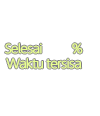
<style>
.page{position:relative;width:100px;height:116px;background:#ffffff}
.page>*{position:absolute;margin:0}
.t1{font:12px "UDShinGoPro-Light";letter-spacing:-0.08em;color:#e9ff90;font-weight:bold}
</style>
<div class="page">
<p class="t1" style="left:5px;top:43px;width:78px;height:11px">Selesai         %</p>
<p class="t1" style="left:6px;top:58px;width:76px;height:11px">Waktu tersisa</p>
</div>
